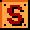
<style>
.page{position:relative;width:30px;height:30px;background:#000000}
.page>*{position:absolute;margin:0}
.t1{font:33px "Onesize";color:#a80000;scale:0.91 1}
.t2{font:33px "Onesize";scale:0.91 1}
</style>
<div class="page">
<p class="t1" style="left:7px;top:5px;width:15px;height:19px">S</p>
<p class="t2" style="left:9px;top:7px;width:15px;height:19px">S</p>
</div>
